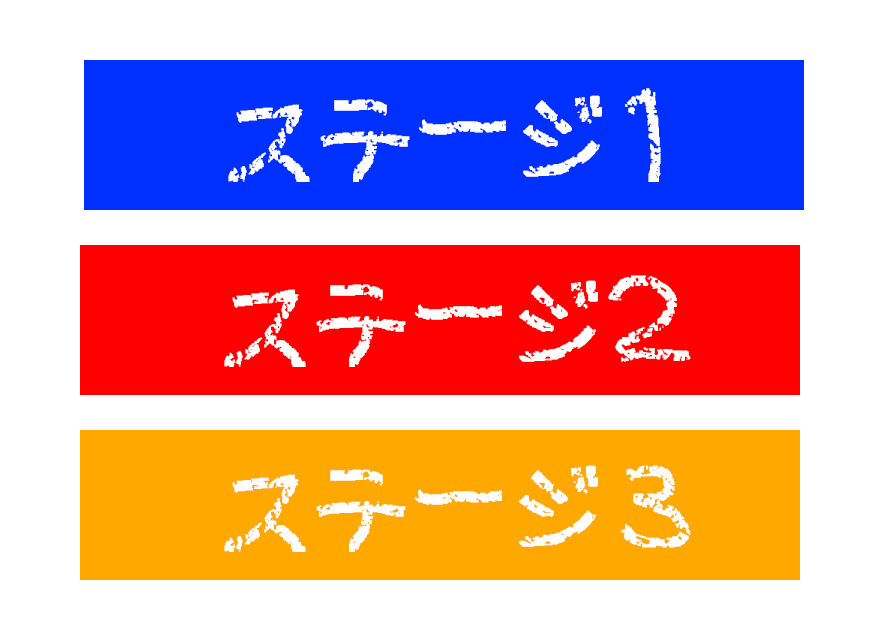
<style>
.page{position:relative;width:880px;height:640px;background:#ffffff}
.page>*{position:absolute;margin:0}
.t1{font:96px "FontFace";color:#ffffff}
</style>
<div class="page">
<p class="t1" style="left:228px;top:88px;width:433px;height:94px">ステージ１</p>
<p class="t1" style="left:224px;top:275px;width:467px;height:92px">ステージ２</p>
<p class="t1" style="left:224px;top:465px;width:467px;height:87px">ステージ３</p>
</div>
